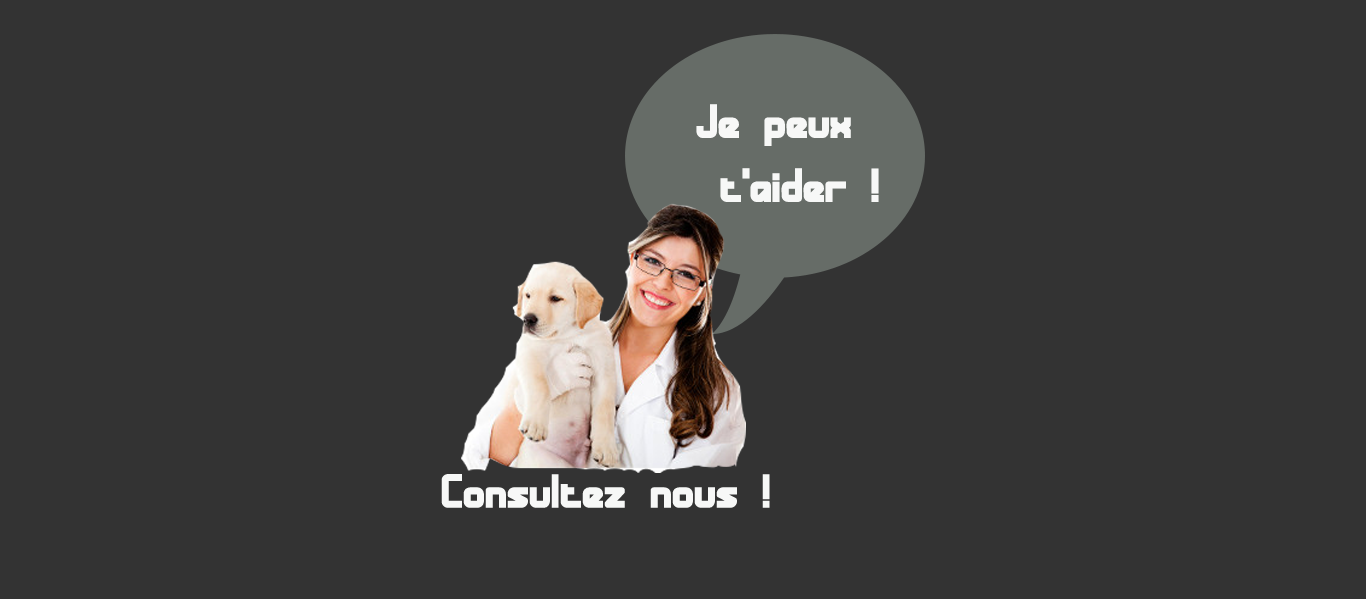
<style>
.page{position:relative;width:1366px;height:599px;background:#333333}
.page>*{position:absolute;margin:0}
.t1{font:48px/16px "BandwidthBandlessBRK";color:#f7f8f7}
.t2{font:48px "BandwidthBandlessBRK";color:#f7f8f7}
</style>
<div class="page">
<p class="t1" style="left:696px;top:104px;width:183px;height:98px">Je peux<br><br><br><br> t'aider !</p>
<p class="t2" style="left:441px;top:474px;width:329px;height:34px">Consultez nous !</p>
</div>
